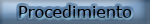
<style>
.page{position:relative;width:150px;height:24px}
.page>*{position:absolute;margin:0}
.t1{font:16px "Verdana";color:#000000}
</style>
<div class="page">
<p class="t1" style="left:19px;top:5px;width:113px;height:13px">Procedimiento</p>
</div>
